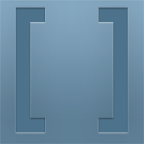
<style>
.page{position:relative;width:144px;height:144px}
.page>*{position:absolute;margin:0}
.t1{font:148.2px "LeagueGothic";color:#4d728c}
</style>
<div class="page">
<p class="t1" style="left:15px;top:7px;width:113px;height:126px">[  ]</p>
</div>
